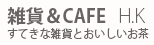
<style>
.page{position:relative;width:154px;height:45px;background:#fffcfc}
.page>*{position:absolute;margin:0}
.t1{font:18.7px "KozGoPr6N-Bold";color:#696464}
.t2{font:18.7px "KozGoPr6N-ExtraLight";color:#696464}
.t3{font:11.5px "KozGoPr6N-Regular";color:#696464;scale:0.95 1}
</style>
<div class="page">
<p class="t1" style="left:7px;top:7px;width:138px;height:18px">雑貨＆CAFE   <span class="t2">H.K</span></p>
<p class="t3" style="left:7px;top:28px;width:142px;height:12px">すてきな雑貨とおいしいお茶</p>
</div>
